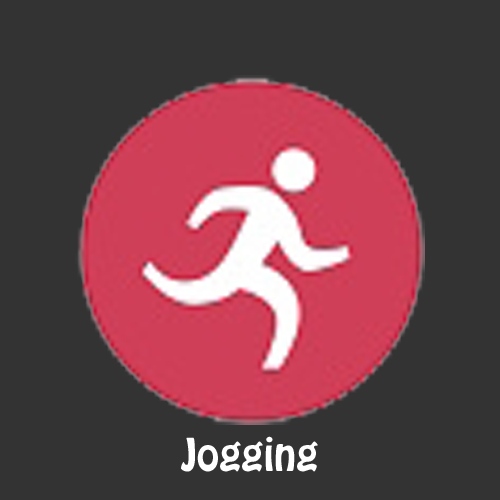
<style>
.page{position:relative;width:500px;height:500px;background:#333333}
.page>*{position:absolute;margin:0}
.t1{font:40px "HoboStd";color:#ffffff}
</style>
<div class="page">
<p class="t1" style="left:181px;top:436px;width:137px;height:36px">Jogging</p>
</div>
